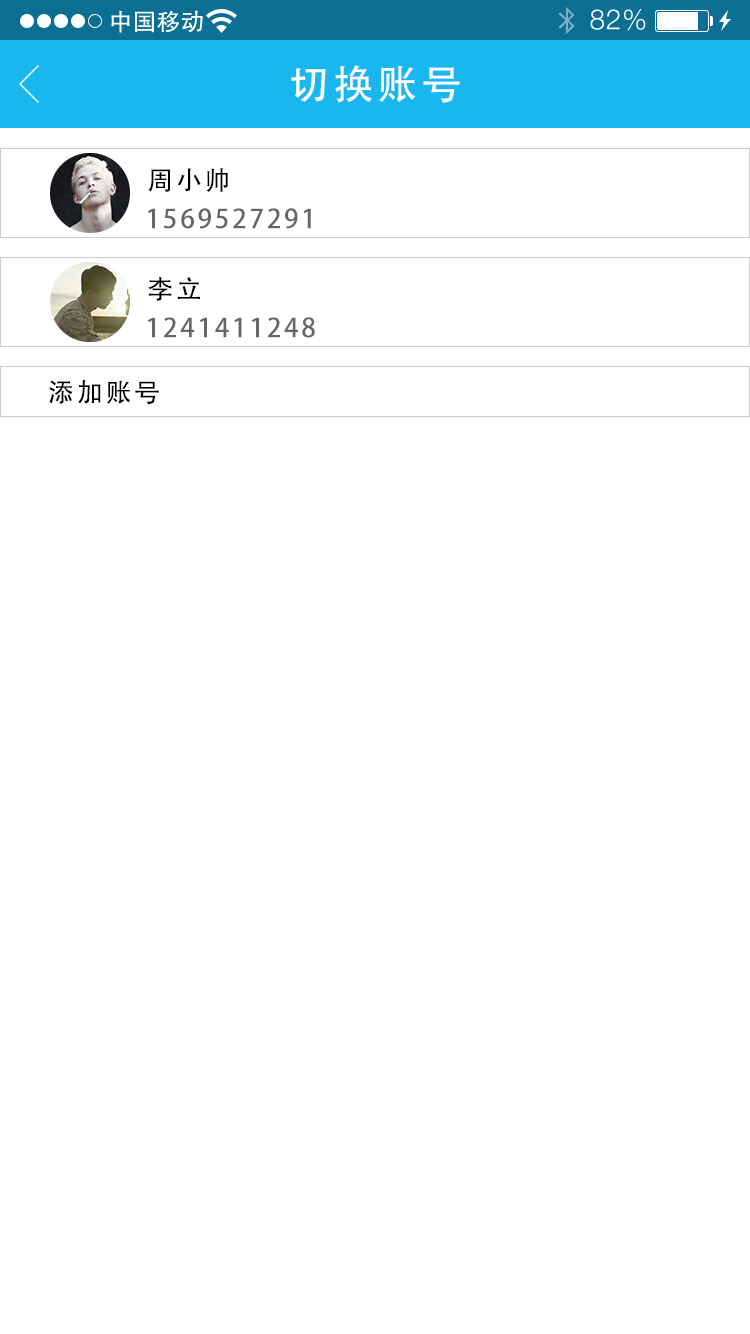
<style>
.page{position:relative;width:750px;height:1334px;background:#ffffff}
.page>*{position:absolute;margin:0}
.t1{font:40px "AdobeHeitiStd-Regular";letter-spacing:0.104em;color:#ffffff}
.t2{font:26px "AdobeHeitiStd-Regular";letter-spacing:0.104em;color:#000000}
.t3{font:26px "AdobeHeitiStd-Regular";letter-spacing:0.104em;color:#666666}
</style>
<div class="page">
<p class="t1" style="left:291px;top:65px;width:169px;height:38px">切换账号</p>
<p class="t2" style="left:148px;top:168px;width:80px;height:24px">周小帅</p>
<p class="t3" style="left:148px;top:208px;width:163px;height:21px">1569527291</p>
<p class="t2" style="left:148px;top:277px;width:52px;height:24px">李立</p>
<p class="t3" style="left:148px;top:317px;width:167px;height:21px">1241411248</p>
<p class="t2" style="left:49px;top:379px;width:110px;height:26px">添加账号</p>
</div>
